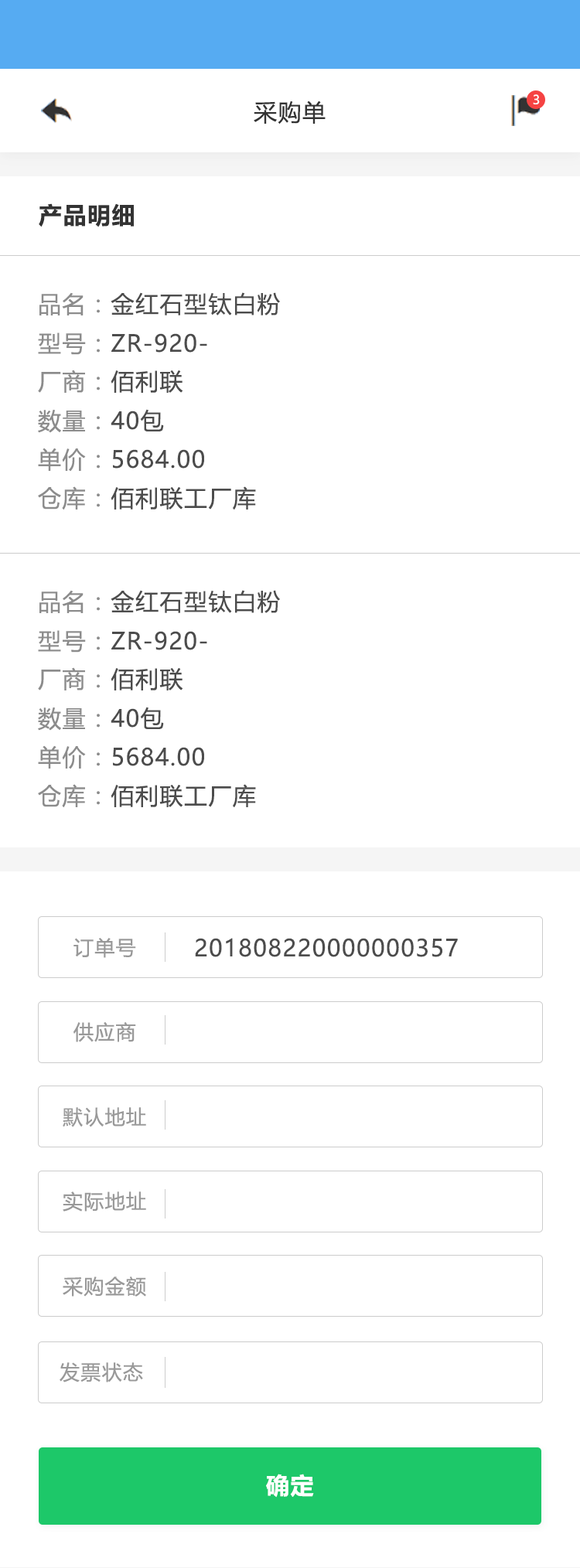
<style>
.page{position:relative;width:580px;height:1568px;background:#ffffff}
.page>*{position:absolute;margin:0}
.t1{font:23.2px "MicrosoftYaHeiUI";letter-spacing:0.05em;color:#333333}
.t2{font:12.4px "MicrosoftYaHeiUI";color:#ffffff}
.t3{font:23.2px "MicrosoftYaHeiUI-Bold";letter-spacing:0.05em;color:#333333}
.t4{font:23.2px "MicrosoftYaHeiUI";letter-spacing:0.05em;color:#4c4c4c}
.t5{font:23.2px "MicrosoftYaHeiUI";letter-spacing:0.05em;color:#8c8c8c}
.t6{font:20.1px "MicrosoftYaHeiUI";letter-spacing:0.05em;color:#999999}
.t7{font:23.2px "MicrosoftYaHeiUI-Bold";letter-spacing:0.05em;color:#ffffff}
</style>
<div class="page">
<p class="t1" style="left:254px;top:101px;width:72px;height:23px">采购单</p>
<p class="t2" style="left:533px;top:94px;width:7px;height:10px">3</p>
<p class="t3" style="left:39px;top:203px;width:95px;height:24px">产品明细</p>
<p class="t4" style="left:39px;top:292px;width:241px;height:23px"><span class="t5">品名：</span>金红石型钛白粉</p>
<p class="t4" style="left:38px;top:332px;width:169px;height:23px"><span class="t5">型号：</span>ZR-920-</p>
<p class="t5" style="left:38px;top:370px;width:145px;height:23px">厂商：<span class="t4">佰利联</span></p>
<p class="t5" style="left:38px;top:409px;width:126px;height:24px">数量：<span class="t4">40包</span></p>
<p class="t4" style="left:38px;top:448px;width:166px;height:24px"><span class="t5">单价：</span>5684.00</p>
<p class="t4" style="left:38px;top:486px;width:218px;height:24px"><span class="t5">仓库：</span>佰利联工厂库</p>
<p class="t4" style="left:39px;top:590px;width:241px;height:23px"><span class="t5">品名：</span>金红石型钛白粉</p>
<p class="t4" style="left:38px;top:630px;width:169px;height:23px"><span class="t5">型号：</span>ZR-920-</p>
<p class="t5" style="left:38px;top:667px;width:145px;height:23px">厂商：<span class="t4">佰利联</span></p>
<p class="t5" style="left:38px;top:707px;width:126px;height:24px">数量：<span class="t4">40包</span></p>
<p class="t4" style="left:38px;top:745px;width:166px;height:24px"><span class="t5">单价：</span>5684.00</p>
<p class="t4" style="left:38px;top:784px;width:218px;height:24px"><span class="t5">仓库：</span>佰利联工厂库</p>
<p class="t6" style="left:73px;top:938px;width:63px;height:20px">订单号</p>
<p class="t4" style="left:195px;top:938px;width:263px;height:19px">201808220000000357</p>
<p class="t6" style="left:73px;top:1022px;width:63px;height:20px">供应商</p>
<p class="t6" style="left:63px;top:1107px;width:83px;height:20px">默认地址</p>
<p class="t6" style="left:63px;top:1191px;width:83px;height:21px">实际地址</p>
<p class="t6" style="left:63px;top:1277px;width:83px;height:20px">采购金额</p>
<p class="t6" style="left:60px;top:1362px;width:83px;height:20px">发票状态</p>
<p class="t7" style="left:266px;top:1474px;width:48px;height:24px">确定</p>
</div>
